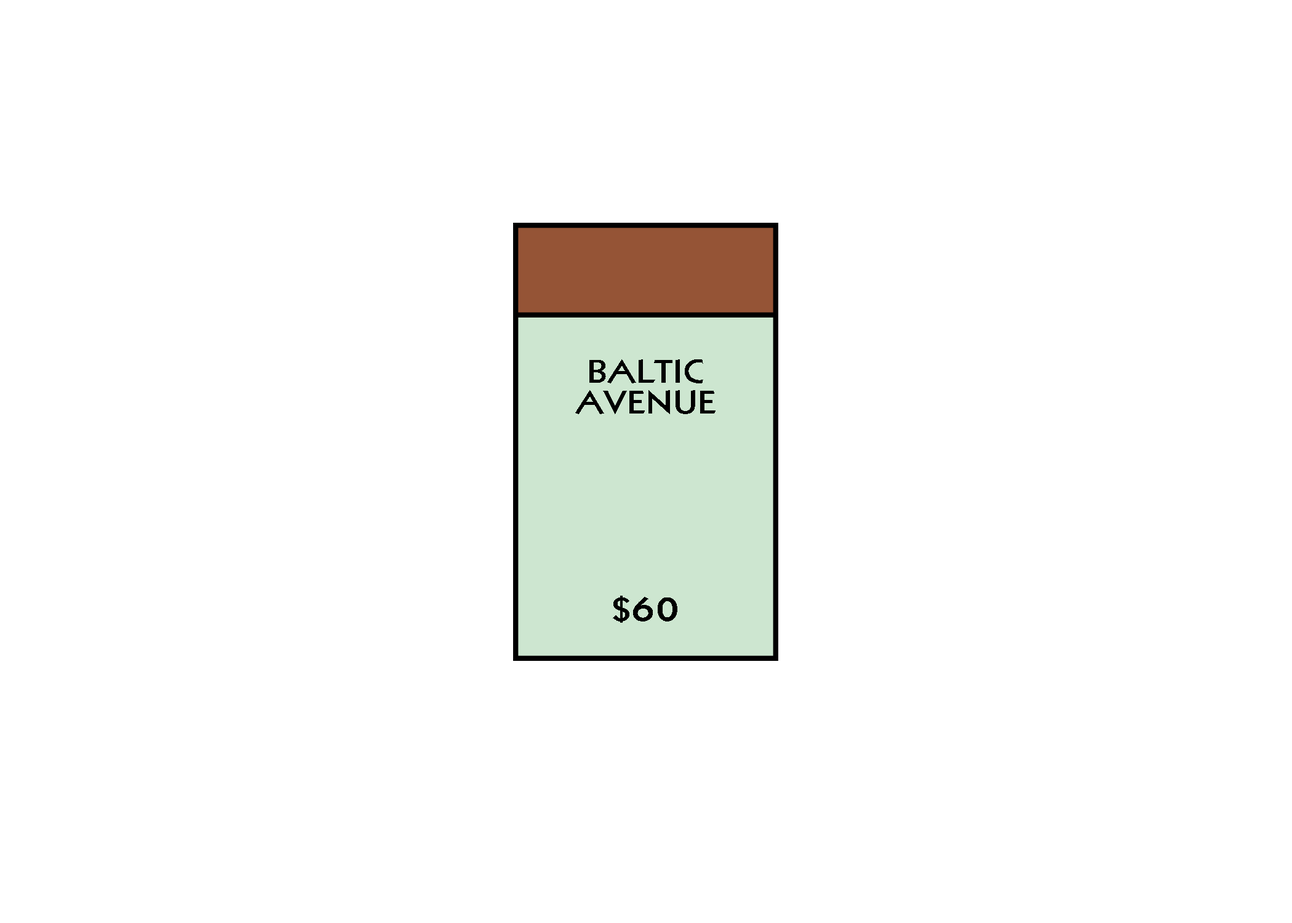
<style>
.page{position:relative;width:1292px;height:923px;background:#ffffff}
.page>*{position:absolute;margin:0}
.t1{font:32px "Kabel-Heavy";letter-spacing:0.04em;color:#000000;scale:1.16 1}
.t2{font:38.5px "Kabel-Heavy";letter-spacing:0.04em;color:#000000;scale:1.16 1}
</style>
<div class="page">
<p class="t1" style="left:589px;top:359px;width:114px;height:24px">BALTIC</p>
<p class="t1" style="left:575px;top:390px;width:141px;height:24px">AVENUE</p>
<p class="t2" style="left:613px;top:596px;width:64px;height:27px"><span class="t1">$</span>60</p>
</div>
